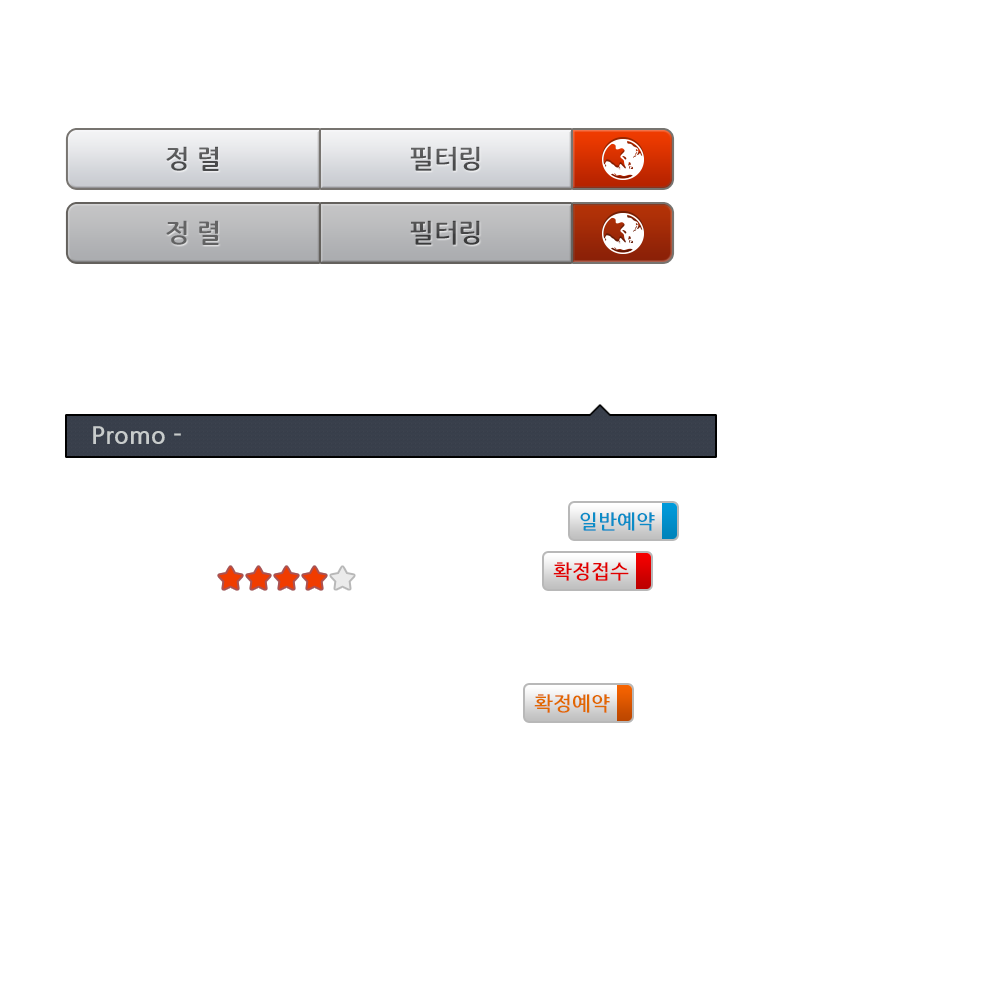
<style>
.page{position:relative;width:1000px;height:1000px;background:#ffffff}
.page>*{position:absolute;margin:0}
.t1{font:26px "NanumGothicBold";color:#555657}
.t2{font:26px "NanumGothicBold";color:#565758}
.t3{font:26px "NanumGothicBold";color:#636364}
.t4{font:26px "NanumGothicBold";color:#49494a}
.t5{font:24px "NanumGothicBold";color:#c8cccc}
.t6{font:20px "NanumGothicBold";color:#0b8cc7}
.t7{font:20px "NanumGothicBold";color:#e10000}
.t8{font:20px "NanumGothicBold";color:#e16800}
</style>
<div class="page">
<p class="t1" style="left:166px;top:146px;width:53px;height:25px">정 렬</p>
<p class="t2" style="left:410px;top:146px;width:70px;height:25px">필터링</p>
<p class="t3" style="left:166px;top:220px;width:53px;height:25px">정 렬</p>
<p class="t4" style="left:410px;top:220px;width:70px;height:25px">필터링</p>
<p class="t5" style="left:93px;top:426px;width:88px;height:18px">Promo -</p>
<p class="t6" style="left:580px;top:512px;width:75px;height:19px">일반예약</p>
<p class="t7" style="left:553px;top:562px;width:76px;height:19px">확정접수</p>
<p class="t8" style="left:534px;top:694px;width:76px;height:19px">확정예약</p>
</div>
